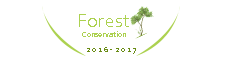
<style>
.page{position:relative;width:240px;height:60px;background:#ffffff}
.page>*{position:absolute;margin:0}
.t1{font:20.3px "Corbel";color:#acd150}
.t2{font:7.6px "Corbel";color:#acd150}
.t3{font:7.6px "Corbel";color:#698b14}
</style>
<div class="page">
<p class="t1" style="left:79px;top:14px;width:50px;height:13px">Forest</p>
<p class="t2" style="left:82px;top:31px;width:44px;height:6px">Conservation</p>
<p class="t3" style="left:87px;top:47px;width:49px;height:7px">2 0 1 6 - 2 0 1 7</p>
</div>
